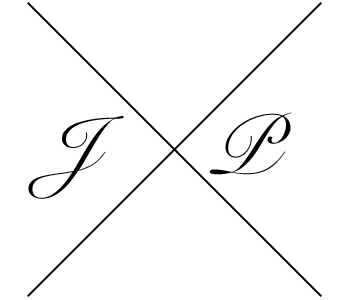
<style>
.page{position:relative;width:350px;height:300px;background:#ffffff}
.page>*{position:absolute;margin:0}
.t1{font:83.3px "SnellRoundhand";color:#000000}
</style>
<div class="page">
<p class="t1" style="left:209px;top:112px;width:83px;height:63px">P</p>
<p class="t1" style="left:28px;top:116px;width:96px;height:83px">J</p>
</div>
